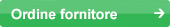
<style>
.page{position:relative;width:170px;height:27px;background:#33b655}
.page>*{position:absolute;margin:0}
.t1{font:14px "Arial-BoldMT";color:#fefffe}
</style>
<div class="page">
<p class="t1" style="left:11px;top:8px;width:106px;height:12px">Ordine fornitore</p>
</div>
